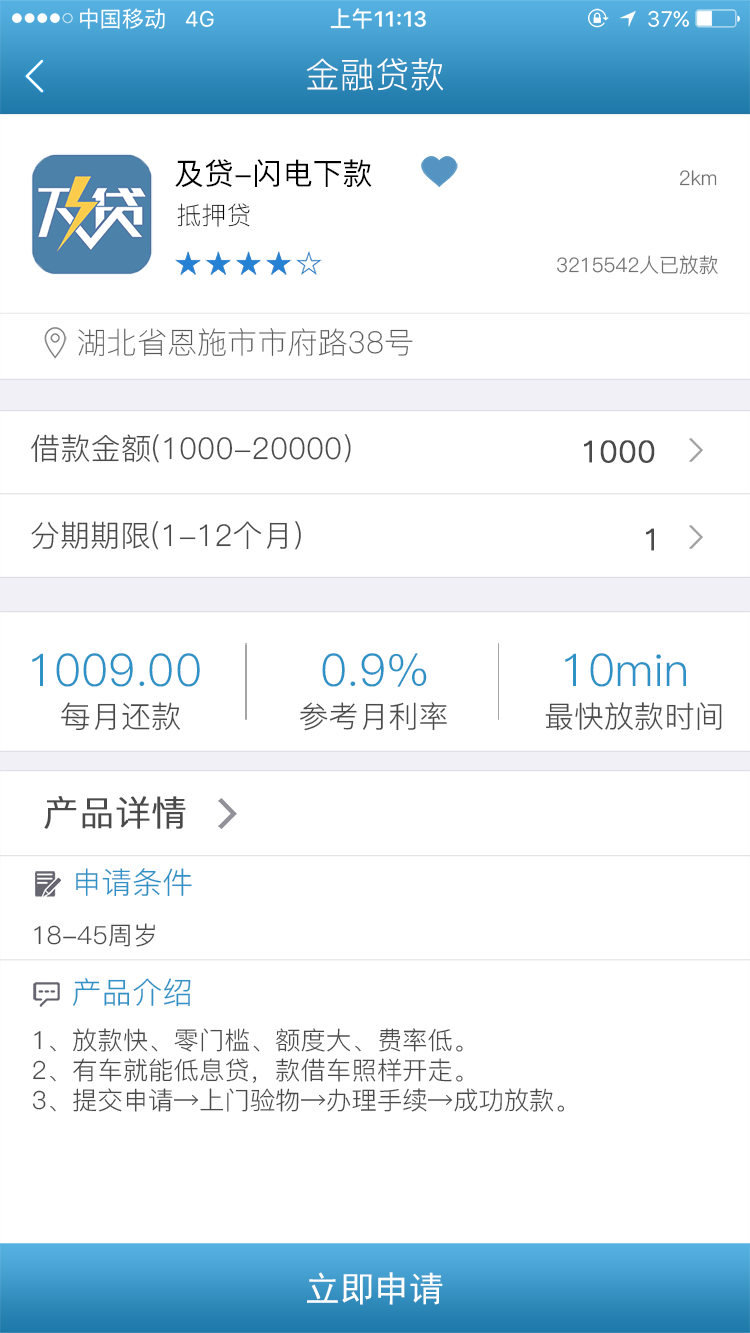
<style>
.page{position:relative;width:750px;height:1333px;background:#ffffff}
.page>*{position:absolute;margin:0}
.t1{font:35px "PingFang-SC-Regular";color:#ffffff}
.t2{font:30px "PingFang-SC-Medium";color:#000000}
.t3{font:20px "PingFang-SC-Regular";color:#6f6f6f}
.t4{font:25px "PingFang-SC-Light";color:#000000}
.t5{font:30px "PingFang-SC-Light";color:#575757}
.t6{font:30px "PingFang-SC-Regular";color:#4a4a4a}
.t7{font:30px "PingFang-SC-Regular";color:#4a4a4a;font-weight:bold}
.t8{font:45px "PingFang-SC-Regular";color:#2e92c7}
.t9{font:35px "PingFang-SC-Regular";color:#4a4a4a;font-weight:bold}
.t10{font:30px "PingFang-SC-Regular";color:#2e92c7}
.t11{font:25px "PingFang-SC-Regular";color:#4a4a4a}
.t12{font:35px "SimHei";color:#ffffff}
</style>
<div class="page">
<p class="t1" style="left:306px;top:58px;width:138px;height:33px">金融贷款</p>
<p class="t2" style="left:175px;top:159px;width:197px;height:29px">及贷-闪电下款</p>
<p class="t3" style="left:679px;top:170px;width:38px;height:16px">2km</p>
<p class="t4" style="left:177px;top:203px;width:73px;height:24px">抵押贷</p>
<p class="t3" style="left:557px;top:255px;width:161px;height:20px">3215542人已放款</p>
<p class="t5" style="left:78px;top:328px;width:335px;height:28px">湖北省恩施市市府路38号</p>
<p class="t6" style="left:31px;top:434px;width:320px;height:29px">借款金额(1000-20000)</p>
<p class="t7" style="left:584px;top:440px;width:71px;height:23px">1000</p>
<p class="t6" style="left:31px;top:521px;width:270px;height:29px">分期期限(1-12个月）</p>
<p class="t7" style="left:646px;top:528px;width:8px;height:23px">1</p>
<p class="t8" style="left:32px;top:653px;width:168px;height:34px">1009.00</p>
<p class="t8" style="left:322px;top:653px;width:105px;height:34px">0.9%</p>
<p class="t8" style="left:565px;top:653px;width:121px;height:34px">10min</p>
<p class="t6" style="left:61px;top:702px;width:119px;height:29px">每月还款</p>
<p class="t6" style="left:300px;top:702px;width:147px;height:29px">参考月利率</p>
<p class="t6" style="left:545px;top:702px;width:177px;height:29px">最快放款时间</p>
<p class="t9" style="left:44px;top:796px;width:142px;height:33px">产品详情</p>
<p class="t10" style="left:76px;top:868px;width:116px;height:29px">申请条件</p>
<p class="t11" style="left:34px;top:923px;width:121px;height:24px">18-45周岁</p>
<p class="t10" style="left:73px;top:978px;width:118px;height:29px">产品介绍</p>
<p class="t11" style="left:33px;top:1028px;width:532px;height:84px">1、放款快、零门槛、额度大、费率低。<br>2、有车就能低息贷，款借车照样开走。<br>3、提交申请→上门验物→办理手续→成功放款。</p>
<p class="t12" style="left:307px;top:1272px;width:136px;height:33px">立即申请</p>
</div>
